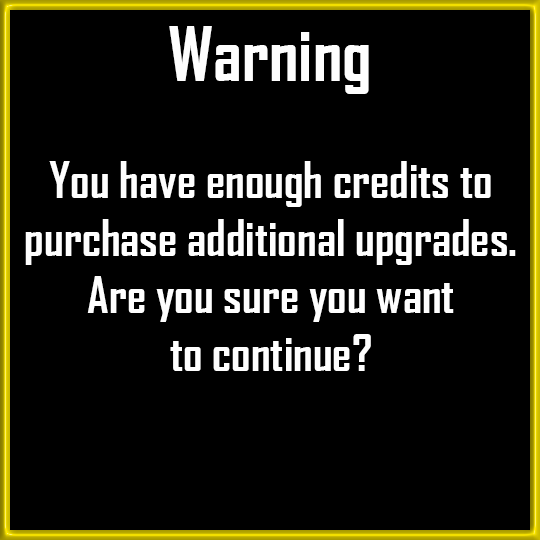
<style>
.page{position:relative;width:540px;height:540px;background:#000000}
.page>*{position:absolute;margin:0}
.t1{font:72px "AgencyFB-Bold";color:#fefefe}
.t2{font:48px "AgencyFB-Bold";color:#fefefe}
</style>
<div class="page">
<p class="t1" style="left:169px;top:26px;width:200px;height:68px">Warning</p>
<p class="t2" style="left:25px;top:161px;width:491px;height:210px;text-align:center">You have enough credits to<br>purchase additional upgrades.<br>Are you sure you want<br>to continue?</p>
</div>
